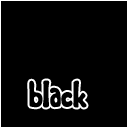
<style>
.page{position:relative;width:128px;height:128px;background:#000000}
.page>*{position:absolute;margin:0}
.t1{font:36px "ChubbyCheeks";color:#000000}
</style>
<div class="page">
<p class="t1" style="left:29px;top:80px;width:58px;height:28px">black</p>
</div>
